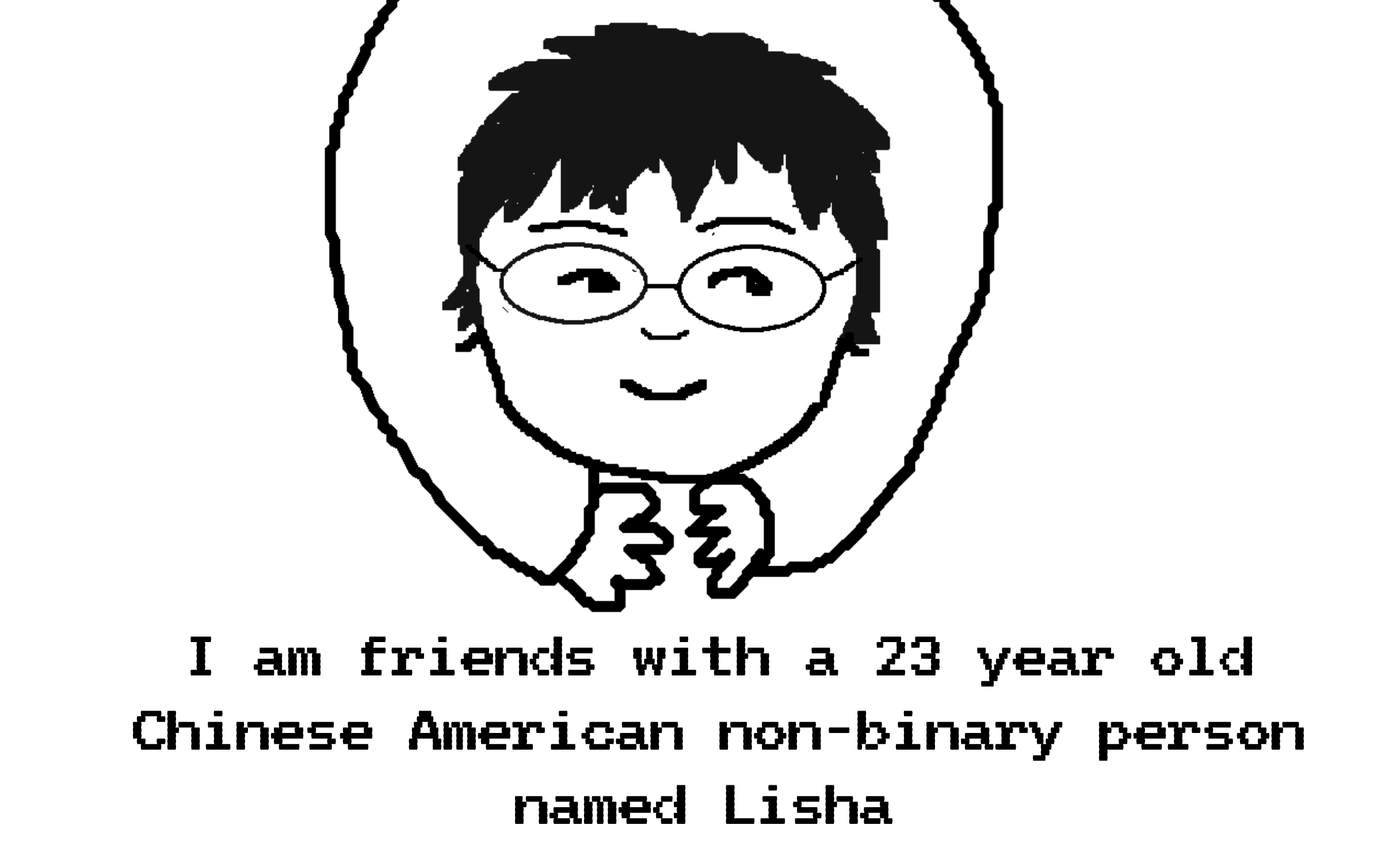
<style>
.page{position:relative;width:1381px;height:863px;background:#ffffff}
.page>*{position:absolute;margin:0}
.t1{font:69.4px "VT323-Regular";letter-spacing:-0.052em;color:#000000;scale:1.43 1}
</style>
<div class="page">
<p class="t1" style="left:132px;top:637px;width:1173px;height:187px;text-align:center">I am friends with a 23 year old<br>Chinese American non-binary person<br>named Lisha</p>
</div>
